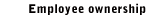
<style>
.page{position:relative;width:153px;height:19px;background:#ffffff}
.page>*{position:absolute;margin:0}
.t1{font:12px "BellGothicBT-Black";letter-spacing:0.04em;color:#030000}
</style>
<div class="page">
<p class="t1" style="left:29px;top:3px;width:117px;height:12px">Employee ownership</p>
</div>
